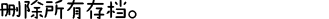
<style>
.page{position:relative;width:329px;height:19px;background:#ffffff}
.page>*{position:absolute;margin:0}
.t1{font:24px "¢è?";color:#000000}
</style>
<div class="page">
<p class="t1" style="left:0px;top:0px;width:137px;height:20px">删除所有存档。</p>
</div>
